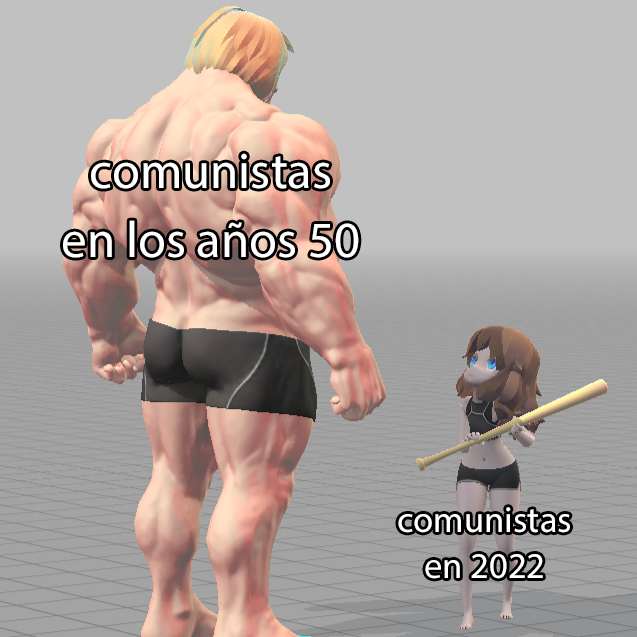
<style>
.page{position:relative;width:637px;height:637px;background:#c1c1c1}
.page>*{position:absolute;margin:0}
.t1{font:50.9px "MyriadPro-Regular";color:#ffffff}
.t2{font:36.6px "MyriadPro-Regular";color:#ffffff}
</style>
<div class="page">
<p class="t1" style="left:63px;top:153px;width:296px;height:105px;text-align:center">comunistas<br>en los años 50</p>
<p class="t2" style="left:398px;top:507px;width:172px;height:72px;text-align:center">comunistas<br>en 2022</p>
</div>
